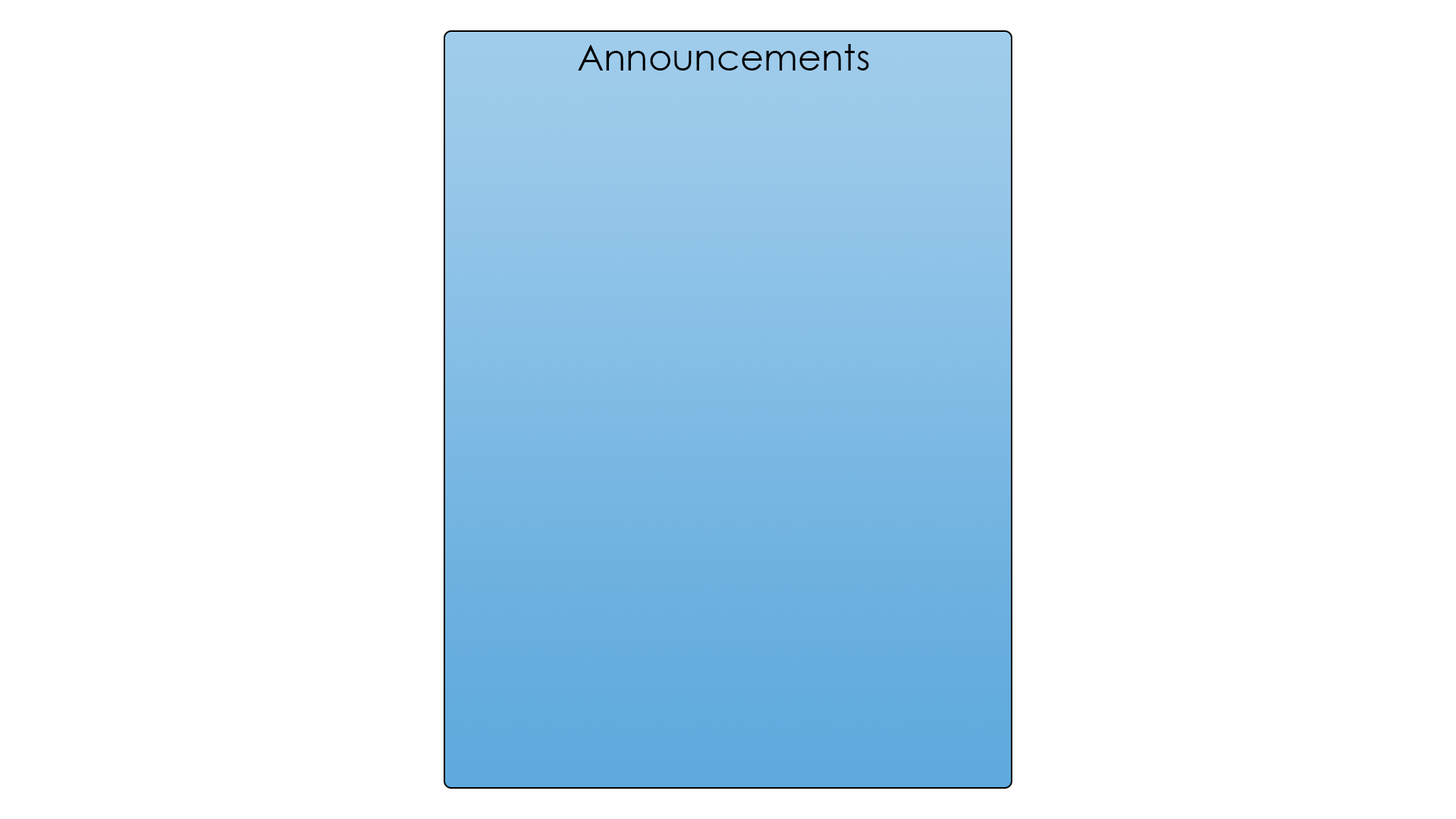
<style>
.page{position:relative;width:1456px;height:819px;background:#ffffff}
.page>*{position:absolute;margin:0}
.t1{font:36.4px "CenturyGothic";color:#000000}
</style>
<div class="page">
<p class="t1" style="left:578px;top:44px;width:291px;height:27px">Announcements</p>
</div>
